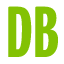
<style>
.page{position:relative;width:64px;height:64px;background:#ffffff}
.page>*{position:absolute;margin:0}
.t1{font:72px "YanoneKaffeesatz-Bold";color:#83c203}
</style>
<div class="page">
<p class="t1" style="left:8px;top:6px;width:50px;height:51px">DB</p>
</div>
